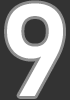
<style>
.page{position:relative;width:70px;height:100px;background:#333333}
.page>*{position:absolute;margin:0}
.t1{font:128.8px "Bahnschrift";color:#ffffff;scale:1.09 1}
</style>
<div class="page">
<p class="t1" style="left:7px;top:3px;width:56px;height:93px">9</p>
</div>
